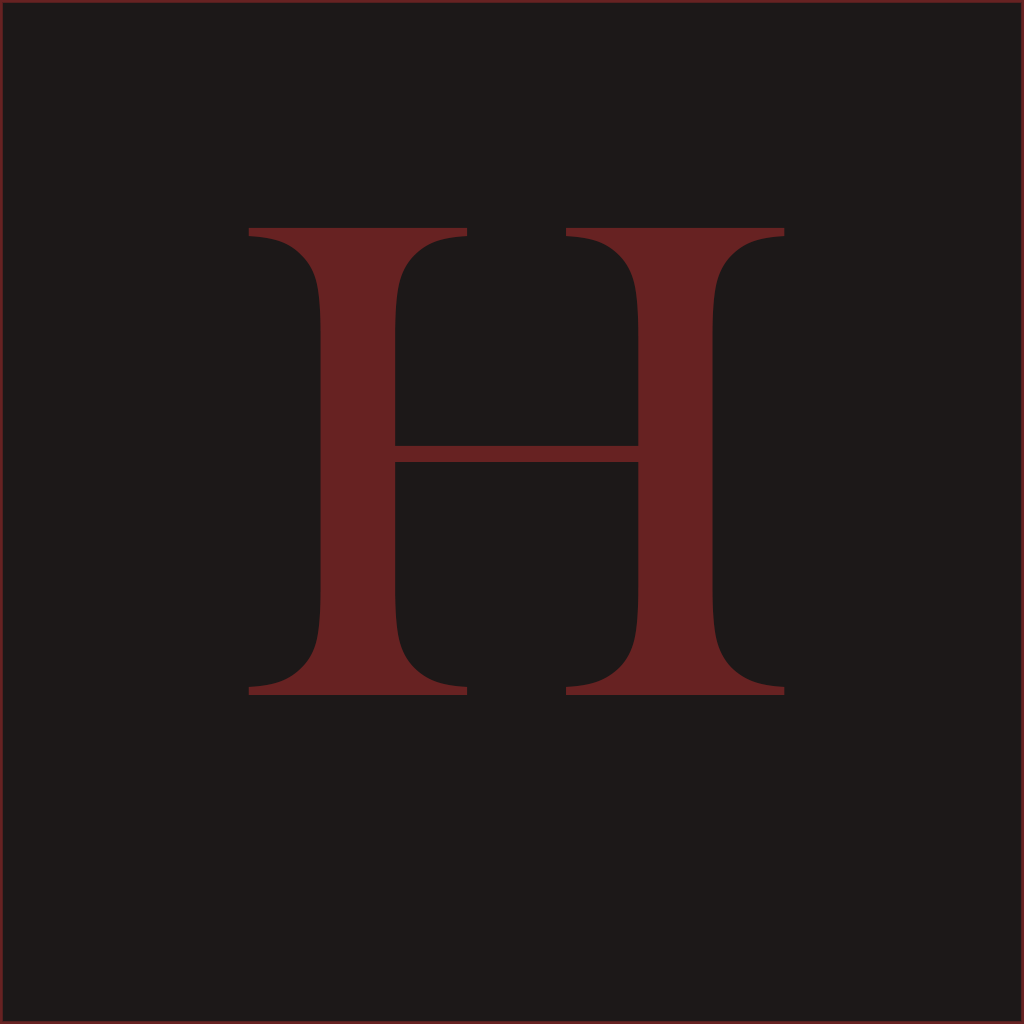
<style>
.page{position:relative;width:1024px;height:1024px;background:#1c1818}
.page>*{position:absolute;margin:0}
.t1{font:700px "BaskOldFace";color:#672222}
</style>
<div class="page">
<p class="t1" style="left:248px;top:227px;width:537px;height:468px">H</p>
</div>
